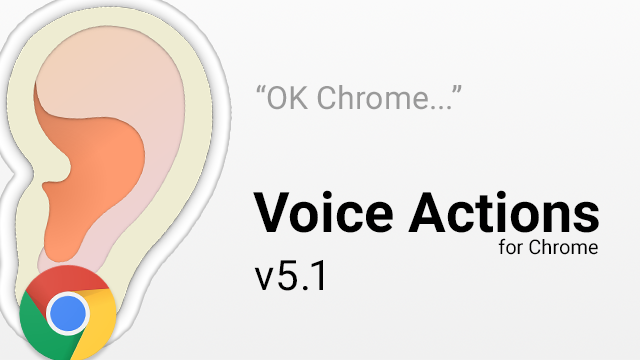
<style>
.page{position:relative;width:640px;height:360px}
.page>*{position:absolute;margin:0}
.t1{font:32px "Roboto-Regular";color:#999999}
.t2{font:56px/21.3px "Roboto-Bold";color:#000000}
.t3{font:20px/21.3px "Roboto-Regular";color:#000000}
.t4{font:42px "Roboto-Regular";letter-spacing:0.06em;color:#000000}
.t5{font:42px "Roboto-Regular";letter-spacing:0.04em;color:#000000}
</style>
<div class="page">
<p class="t1" style="left:256px;top:84px;width:206px;height:26px">“OK Chrome...”</p>
<p class="t2" style="left:253px;top:190px;width:346px;height:65px;text-align:right">Voice Actions<br><span class="t3">for Chrome</span></p>
<p class="t4" style="left:254px;top:260px;width:69px;height:31px">v5.<span class="t5">1</span></p>
</div>
